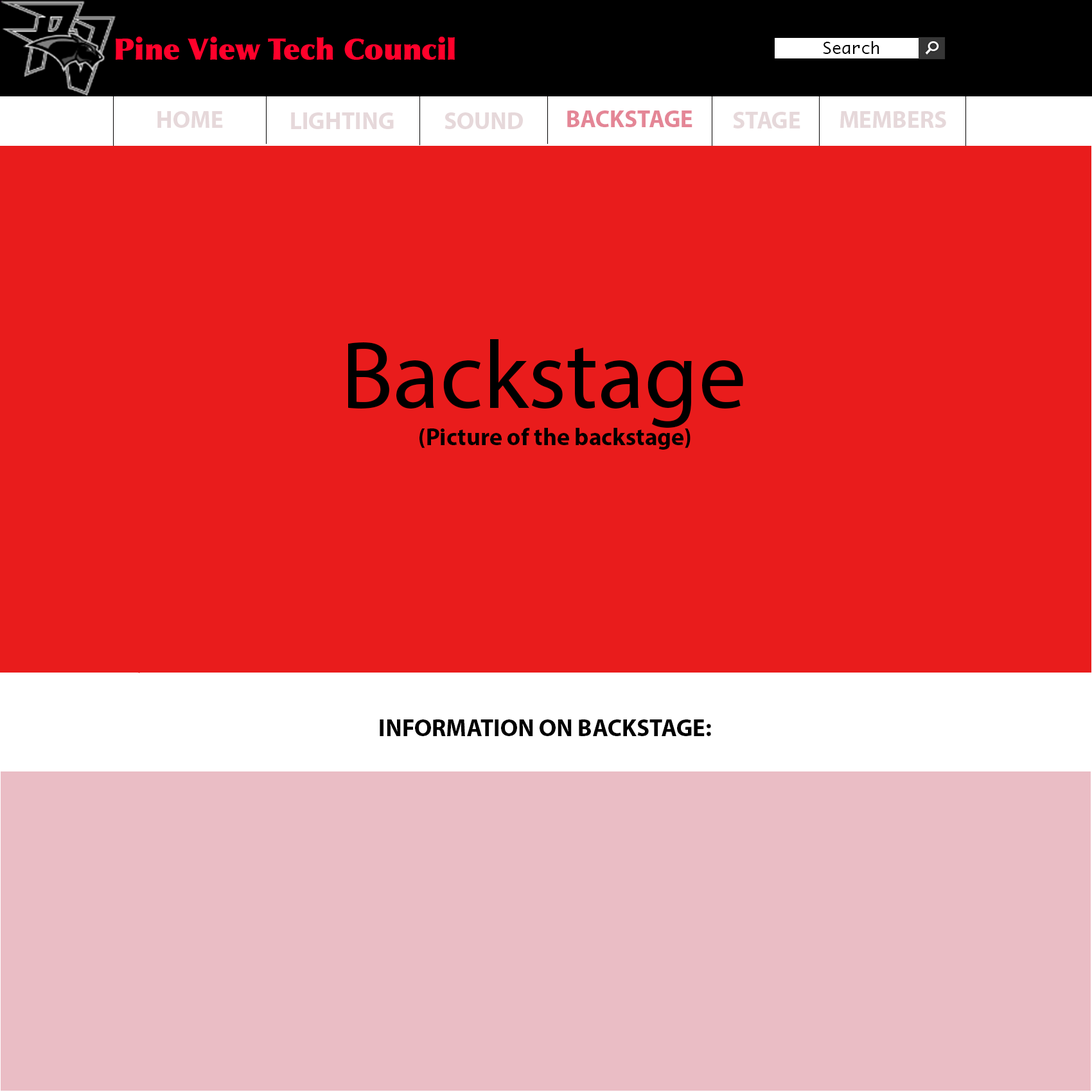
<style>
.page{position:relative;width:1092px;height:1092px;background:#e91c1c}
.page>*{position:absolute;margin:0}
.t1{font:29.4px "Optima-ExtraBlack";color:#ff012b}
.t2{font:16.1px "Monaco";color:#000000}
.t3{font:24.1px "MyriadPro-Bold";color:#e6d8da}
.t4{font:24.1px "MyriadPro-Bold";color:#e48696}
.t5{font:96.4px "MyriadPro-Regular";color:#000000}
.t6{font:24.1px "MyriadPro-Bold";color:#000000}
</style>
<div class="page">
<p class="t1" style="left:116px;top:37px;width:339px;height:23px">Pine View Tech Council</p>
<p class="t2" style="left:823px;top:41px;width:56px;height:13px">Search</p>
<p class="t3" style="left:157px;top:111px;width:66px;height:17px">HOME</p>
<p class="t3" style="left:291px;top:112px;width:103px;height:17px">LIGHTING</p>
<p class="t3" style="left:445px;top:112px;width:78px;height:17px">SOUND</p>
<p class="t4" style="left:567px;top:110px;width:125px;height:17px">BACKSTAGE</p>
<p class="t3" style="left:733px;top:112px;width:67px;height:16px">STAGE</p>
<p class="t3" style="left:840px;top:111px;width:106px;height:17px">MEMBERS</p>
<p class="t5" style="left:348px;top:339px;width:395px;height:89px">Backstage</p>
<p class="t6" style="left:419px;top:428px;width:272px;height:22px">(Picture of the backstage)</p>
<p class="t6" style="left:380px;top:719px;width:331px;height:17px">INFORMATION ON BACKSTAGE:</p>
</div>
